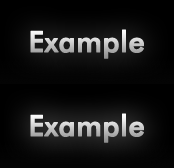
<style>
.page{position:relative;width:174px;height:168px}
.page>*{position:absolute;margin:0}
.t1{font:29px "FuturaBT-Medium";font-weight:bold}
</style>
<div class="page">
<p class="t1" style="left:30px;top:29px;width:114px;height:30px">Example</p>
<p class="t1" style="left:30px;top:113px;width:114px;height:30px">Example</p>
</div>
